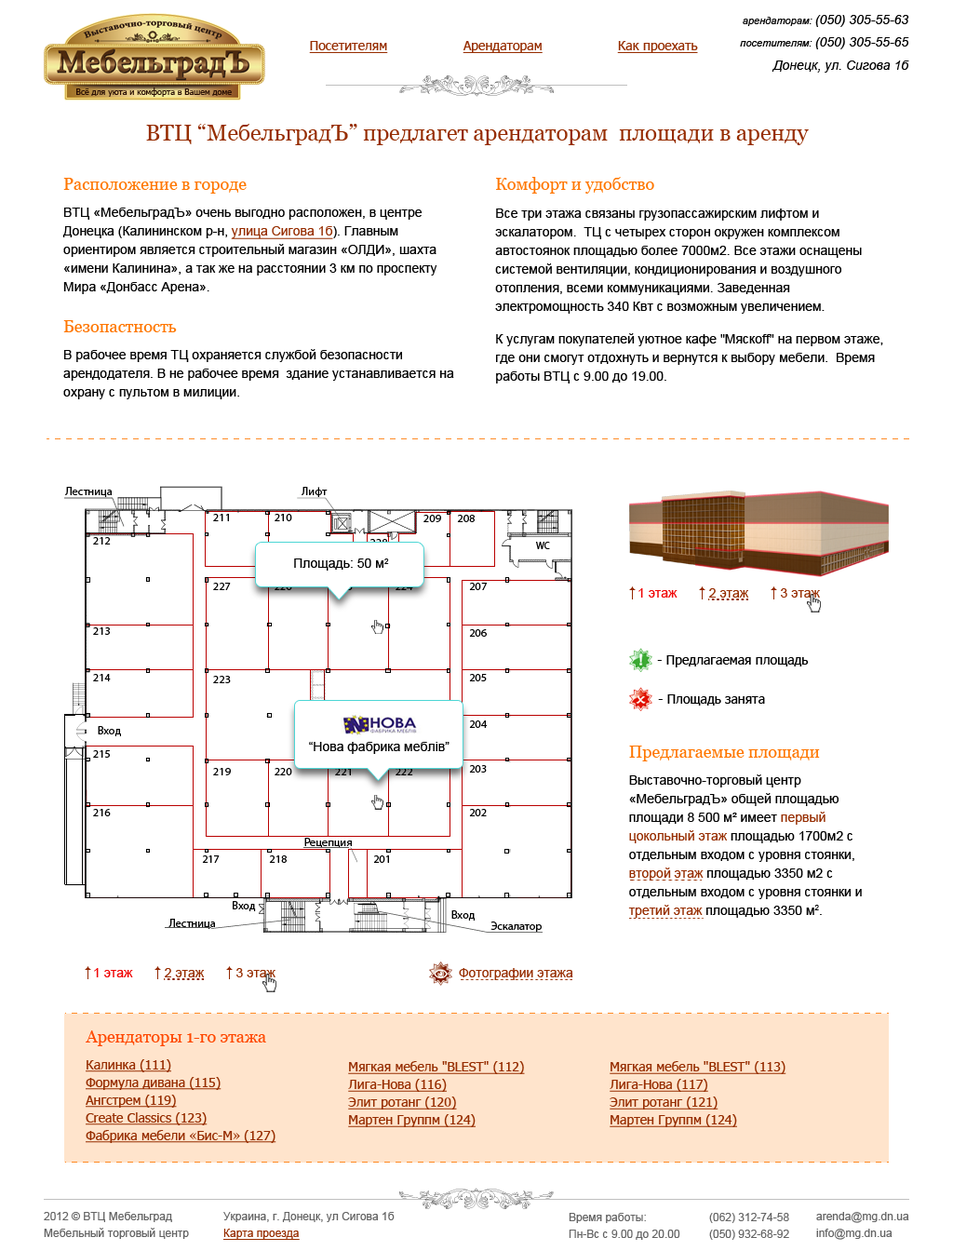
<style>
.page{position:relative;width:953px;height:1251px;background:#ffffff}
.page>*{position:absolute;margin:0}
.t1{font:13px "Arial-ItalicMT";color:#000000}
.t2{font:10.2px "Arial-ItalicMT";color:#000000}
.t3{font:13px "Tahoma";color:#962d00;text-decoration:underline}
.t4{font:8.4px "Tahoma";color:#290f04}
.t5{font:22.3px "Georgia";color:#962d00}
.t6{font:13px/18.6px "ArialMT";color:#000000}
.t7{font:16.8px/15.7px "Georgia";color:#ff7700}
.t8{font:13px/18.6px "ArialMT";color:#962d00;text-decoration:underline}
.t9{font:13px/17.7px "ArialMT";color:#000000}
.t10{font:10px/15.7px "ArialMT";color:#000000}
.t11{font:13px "ArialMT";color:#000000}
.t12{font:13px "ArialMT";color:#f00202}
.t13{font:13px "ArialMT";color:#962d00}
.t14{font:13px "Tahoma";color:#000000}
.t15{font:13px "ArialMT";color:#010101}
.t16{font:13px/18.6px "ArialMT";color:#962d00}
.t17{font:16.8px "Georgia";color:#ff4800}
.t18{font:13px/17.7px "Tahoma";color:#962d00;text-decoration:underline}
.t19{font:11.2px/7.4px "ArialMT";color:#646464}
.t20{font:11.2px/7.4px "ArialMT";color:#962d00;text-decoration:underline}
</style>
<div class="page">
<p class="t1" style="left:743px;top:15px;width:166px;height:12px"><span class="t2">арендаторам: </span>(050) 305-55-63</p>
<p class="t3" style="left:309px;top:41px;width:79px;height:12px">Посетителям</p>
<p class="t3" style="left:463px;top:41px;width:80px;height:12px">Арендаторам</p>
<p class="t3" style="left:617px;top:41px;width:81px;height:12px">Как проехать</p>
<p class="t1" style="left:740px;top:37px;width:169px;height:12px"><span class="t2">посетителям: </span>(050) 305-55-65</p>
<p class="t1" style="left:772px;top:61px;width:137px;height:12px">Донецк, ул. Сигова 1б</p>
<p class="t4" style="left:76px;top:87px;width:156px;height:10px">Всё для уюта и комфорта в Вашем доме</p>
<p class="t5" style="left:146px;top:124px;width:663px;height:21px">ВТЦ “МебельградЪ” предлагет арендаторам  площади в аренду</p>
<p class="t6" style="left:62px;top:178px;width:375px;height:116px;text-align:justify"><span class="t7">Расположение в городе<br></span>ВТЦ «МебельградЪ» очень выгодно расположен, в центре Донецка (Калининском р-н, <span class="t8">улица Сигова 1б</span>). Главным ориентиром является строительный магазин «ОЛДИ», шахта «имени Калинина», а так же на расстоянии 3 км по проспекту Мира «Донбасс Арена»<span class="t9">.</span></p>
<p class="t6" style="left:495px;top:177px;width:388px;height:206px;text-align:justify"><span class="t7">Комфорт и удобство<br></span>Все три этажа связаны грузопассажирским лифтом и эскалатором.  ТЦ с четырех сторон окружен комплексом автостоянок площадью более 7000м2. Все этажи оснащены системой вентиляции, кондиционирования и воздушного отопления, всеми коммуникациями. Заведенная электромощность 340 Квт с возможным увеличением. <br>К услугам покупателей уютное кафе "Мяскоff" на первом этаже, где они смогут отдохнуть и вернутся к выбору мебели.  Время работы ВТЦ с 9.00 до 19.00.</p>
<p class="t6" style="left:63px;top:320px;width:391px;height:79px"><span class="t10"><br></span><span class="t7">Безопастность<br></span>В рабочее время ТЦ охраняется службой безопасности арендодателя. В не рабочее время  здание устанавливается на охрану с пультом в милиции.</p>
<p class="t11" style="left:294px;top:558px;width:95px;height:13px">Площадь: 50 м2</p>
<p class="t12" style="left:639px;top:588px;width:39px;height:10px">1 этаж</p>
<p class="t13" style="left:709px;top:588px;width:40px;height:10px">2 этаж</p>
<p class="t13" style="left:781px;top:588px;width:39px;height:10px">3 этаж</p>
<p class="t14" style="left:657px;top:655px;width:152px;height:12px">- Предлагаемая площадь</p>
<p class="t14" style="left:658px;top:694px;width:107px;height:12px">- Площадь занята</p>
<p class="t15" style="left:309px;top:742px;width:141px;height:12px">“Нова фабрика меблiв”</p>
<p class="t6" style="left:628px;top:746px;width:234px;height:172px;text-align:justify"><span class="t7">Предлагаемые площади<br></span>Выставочно-торговый центр «МебельградЪ» общей площадью площади 8 500 м² имеет <span class="t16">первый цокольный этаж</span> площадью 1700м2 с отдельным входом с уровня стоянки, <span class="t16">второй этаж</span> площадью 3350 м2 с отдельным входом с уровня стоянки и <span class="t16">третий этаж </span>площадью 3350 м2.</p>
<p class="t12" style="left:94px;top:968px;width:39px;height:9px">1 этаж</p>
<p class="t13" style="left:165px;top:968px;width:40px;height:9px">2 этаж</p>
<p class="t13" style="left:236px;top:968px;width:40px;height:9px">3 этаж</p>
<p class="t13" style="left:459px;top:968px;width:114px;height:12px">Фотографии этажа</p>
<p class="t17" style="left:86px;top:1030px;width:180px;height:16px">Арендаторы 1-го этажа</p>
<p class="t18" style="left:86px;top:1059px;width:190px;height:84px;text-align:justify">Калинка (111)<br>Формула дивана (115)<br>Ангстрем (119)<br>Create Classics (123)<br>Фабрика мебели «Бис-М» (127)</p>
<p class="t18" style="left:348px;top:1061px;width:177px;height:66px;text-align:justify">Мягкая мебель "BLEST" (112)<br>Лига-Нова (116)<br>Элит ротанг (120)<br>Мартен Группм (124)</p>
<p class="t18" style="left:610px;top:1061px;width:177px;height:66px;text-align:justify">Мягкая мебель "BLEST" (113)<br>Лига-Нова (117)<br>Элит ротанг (121)<br>Мартен Группм (124)</p>
<p class="t19" style="left:44px;top:1212px;width:145px;height:27px">2012 © ВТЦ Мебельград  <br>Мебельный торговый центр</p>
<p class="t19" style="left:223px;top:1212px;width:172px;height:28px">Украина, г. Донецк, ул Сигова 1б<br><span class="t20">Карта проезда</span></p>
<p class="t19" style="left:569px;top:1213px;width:111px;height:27px">Время работы:<br>Пн-Вс с 9.00 до 20.00</p>
<p class="t19" style="left:709px;top:1213px;width:80px;height:27px">(062) 312-74-58 <br>(050) 932-68-92</p>
<p class="t19" style="left:816px;top:1212px;width:93px;height:28px">arenda@mg.dn.ua<br>info@mg.dn.ua</p>
</div>
